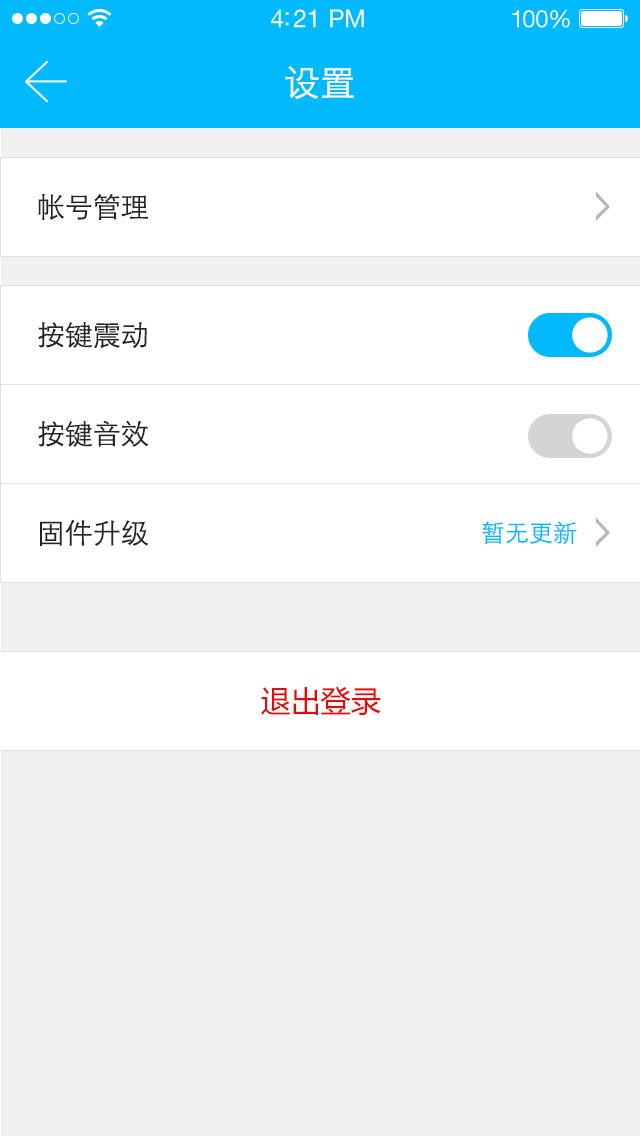
<style>
.page{position:relative;width:640px;height:1136px;background:#f0f0f0}
.page>*{position:absolute;margin:0}
.t1{font:25px "HelveticaNeueLTStd-Roman";letter-spacing:-0.02em;color:#ffffff}
.t2{font:24px "HelveticaNeueLTStd-Roman";letter-spacing:-0.02em;color:#ffffff}
.t3{font:36px "STXihei";color:#ffffff;text-transform:uppercase}
.t4{font:28px "STXihei";color:#232323;text-transform:uppercase}
.t5{font:56.4px "MicrosoftYaHei";color:#b6b6b6;text-transform:uppercase;scale:0.51 1}
.t6{font:24px "STXihei";color:#00b9ff;text-transform:uppercase}
.t7{font:30px "MicrosoftYaHei";color:#ec0606;text-transform:uppercase}
</style>
<div class="page">
<p class="t1" style="left:271px;top:9px;width:93px;height:19px">4:21 PM</p>
<p class="t2" style="left:512px;top:9px;width:58px;height:19px">100%</p>
<p class="t3" style="left:285px;top:66px;width:69px;height:33px">设置</p>
<p class="t4" style="left:38px;top:193px;width:110px;height:27px">帐号管理</p>
<p class="t5" style="left:596px;top:191px;width:14px;height:30px;rotate:180deg">&lt;</p>
<p class="t4" style="left:38px;top:322px;width:109px;height:27px">按键震动</p>
<p class="t4" style="left:38px;top:420px;width:111px;height:27px">按键音效</p>
<p class="t4" style="left:40px;top:519px;width:109px;height:27px">固件升级</p>
<p class="t6" style="left:482px;top:521px;width:95px;height:23px">暂无更新</p>
<p class="t5" style="left:596px;top:517px;width:14px;height:30px;rotate:180deg">&lt;</p>
<p class="t7" style="left:261px;top:686px;width:120px;height:29px">退出登录</p>
</div>
